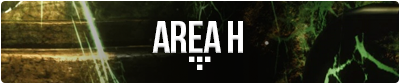
<style>
.page{position:relative;width:400px;height:84px}
.page>*{position:absolute;margin:0}
.t1{font:45px "BebasNeue";letter-spacing:-0.02em;color:#ffffff}
.t2{font:50px "BebasNeue";letter-spacing:-0.02em;color:#ffffff}
</style>
<div class="page">
<p class="t1" style="left:152px;top:21px;width:91px;height:32px">area h</p>
<p class="t2" style="left:189px;top:56px;width:22px;height:6px">...</p>
<p class="t2" style="left:197px;top:64px;width:6px;height:6px">.</p>
</div>
